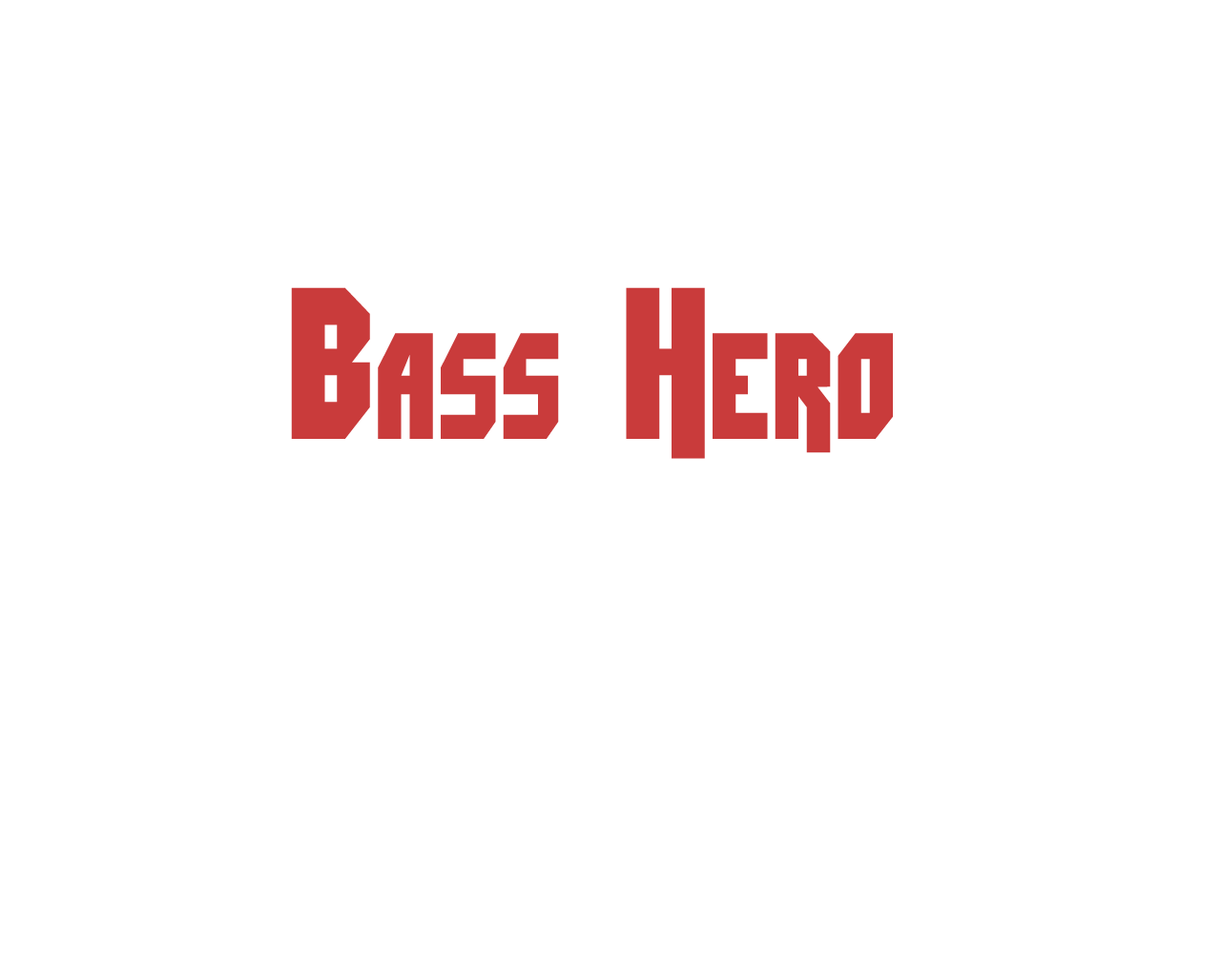
<style>
.page{position:relative;width:1221px;height:977px;background:#ffffff}
.page>*{position:absolute;margin:0}
.t1{font:214.6px "Dimitri";color:#c93b3b;font-variant:small-caps;scale:0.77 1}
</style>
<div class="page">
<p class="t1" style="left:291px;top:287px;width:602px;height:172px">Bass Hero</p>
</div>
